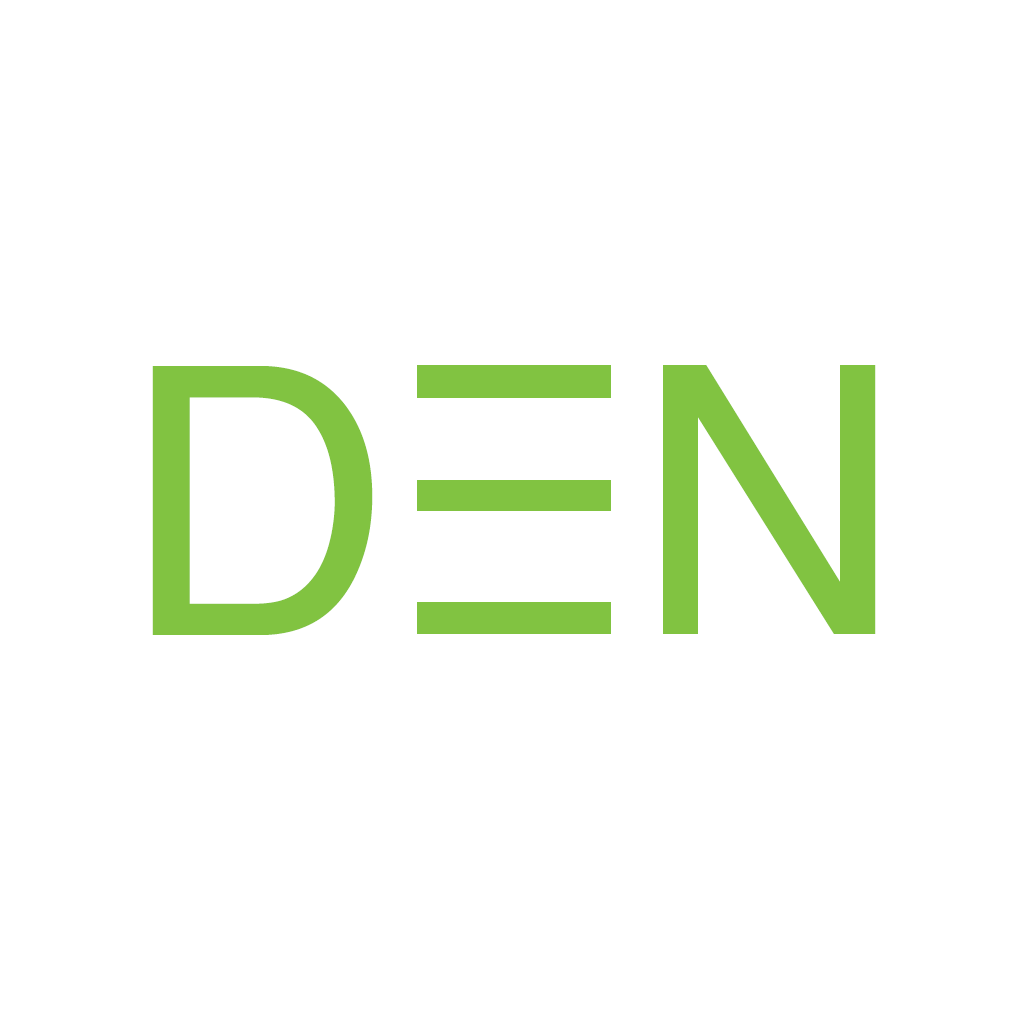
<style>
.page{position:relative;width:1024px;height:1024px;background:#ffffff}
.page>*{position:absolute;margin:0}
.t1{font:375px "Helvetica";letter-spacing:0.06em;color:#81c341}
</style>
<div class="page">
<p class="t1" style="left:152px;top:366px;width:221px;height:269px">D</p>
<p class="t1" style="left:663px;top:365px;width:213px;height:269px">N</p>
</div>
